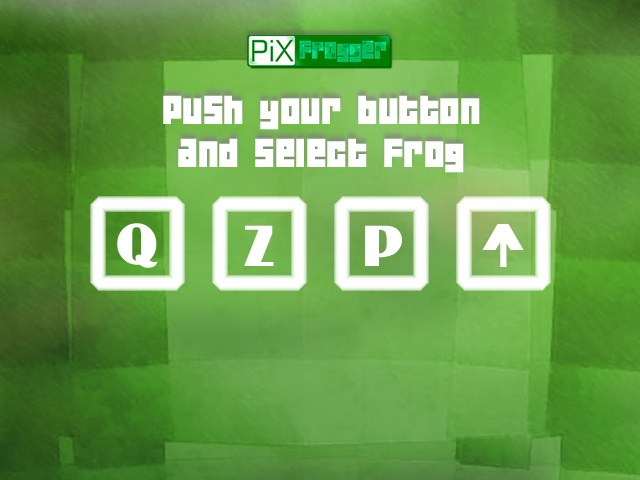
<style>
.page{position:relative;width:640px;height:480px}
.page>*{position:absolute;margin:0}
.t1{font:36px "04b19";color:#ffffff}
.t2{font:60px "Binner-Regular";color:#ffffff}
</style>
<div class="page">
<p class="t1" style="left:163px;top:95px;width:317px;height:78px;text-align:center">Push your button<br>and select Frog</p>
<p class="t2" style="left:117px;top:223px;width:41px;height:45px">q</p>
<p class="t2" style="left:244px;top:225px;width:30px;height:41px">z</p>
<p class="t2" style="left:365px;top:225px;width:37px;height:41px">p</p>
</div>
